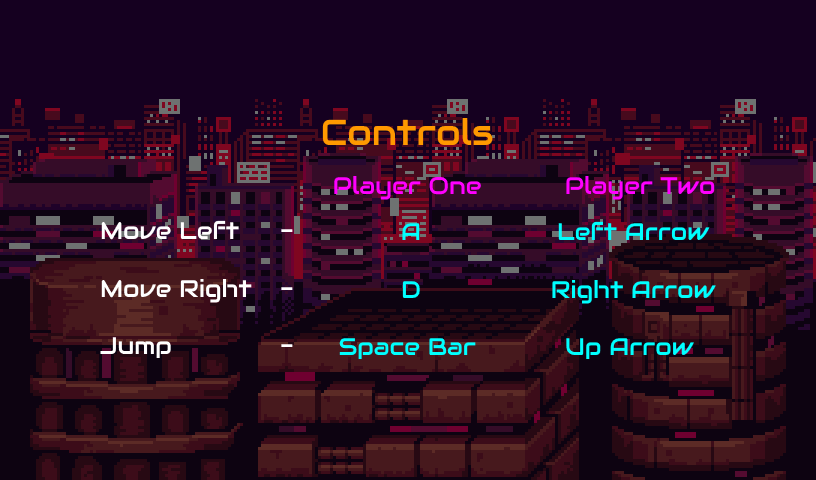
<style>
.page{position:relative;width:816px;height:480px;background:#150020}
.page>*{position:absolute;margin:0}
.t1{font:36px "Audiowide-Regular";color:#ff9900}
.t2{font:24px "Audiowide-Regular";color:#ff00ff}
.t3{font:24px "Audiowide-Regular";color:#ffffff}
.t4{font:24px "Audiowide-Regular";color:#00ffff}
</style>
<div class="page">
<p class="t1" style="left:322px;top:117px;width:171px;height:28px">Controls</p>
<p class="t2" style="left:334px;top:175px;width:147px;height:25px">Player One</p>
<p class="t2" style="left:566px;top:175px;width:149px;height:25px">Player Two</p>
<p class="t3" style="left:100px;top:220px;width:193px;height:138px">Move Left  -<br><br>Move Right -<br><br>Jump   -</p>
<p class="t4" style="left:552px;top:221px;width:164px;height:138px;text-align:center">Left Arrow<br><br>Right Arrow<br><br>Up Arrow</p>
<p class="t4" style="left:339px;top:223px;width:137px;height:136px;text-align:center">A<br><br>D<br><br>Space Bar</p>
</div>
